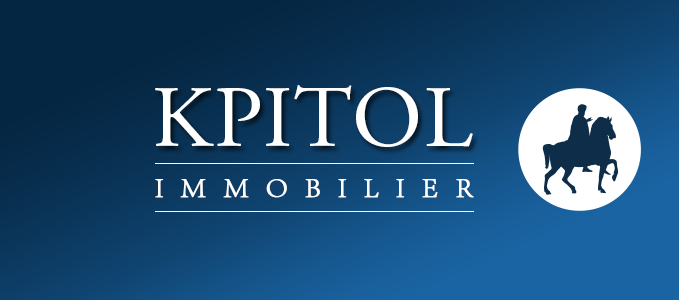
<style>
.page{position:relative;width:679px;height:300px}
.page>*{position:absolute;margin:0}
.t1{font:87.9px "AGaramondPro-Regular";letter-spacing:0.02em;color:#ffffff}
.t2{font:28.1px "AdobeSongStd-Light";letter-spacing:0.58em;color:#ffffff;font-weight:bold}
</style>
<div class="page">
<p class="t1" style="left:155px;top:85px;width:318px;height:62px">KPITOL</p>
<p class="t2" style="left:155px;top:179px;width:319px;height:19px">IMMOBILIER</p>
</div>
